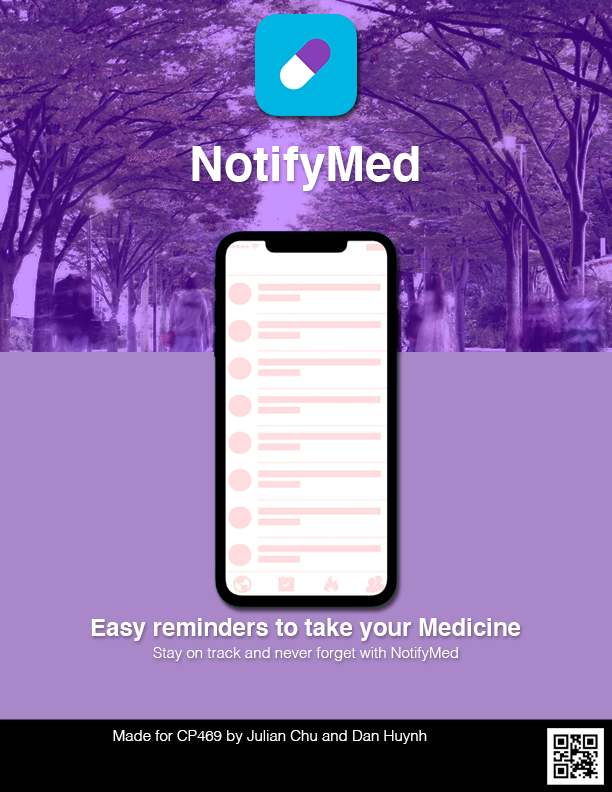
<style>
.page{position:relative;width:612px;height:792px;background:#a987c8}
.page>*{position:absolute;margin:0}
.t1{font:48px "Helvetica-Bold";color:#ffffff}
.t2{font:24px "Helvetica-Bold";color:#ffffff}
.t3{font:15px "Helvetica-Light";color:#ffffff}
</style>
<div class="page">
<p class="t1" style="left:192px;top:146px;width:227px;height:45px">NotifyMed</p>
<p class="t2" style="left:91px;top:618px;width:429px;height:23px">Easy reminders to take your Medicine</p>
<p class="t3" style="left:153px;top:647px;width:305px;height:14px">Stay on track and never forget with NotifyMed</p>
<p class="t3" style="left:113px;top:730px;width:314px;height:14px">Made for CP469 by Julian Chu and Dan Huynh</p>
</div>
